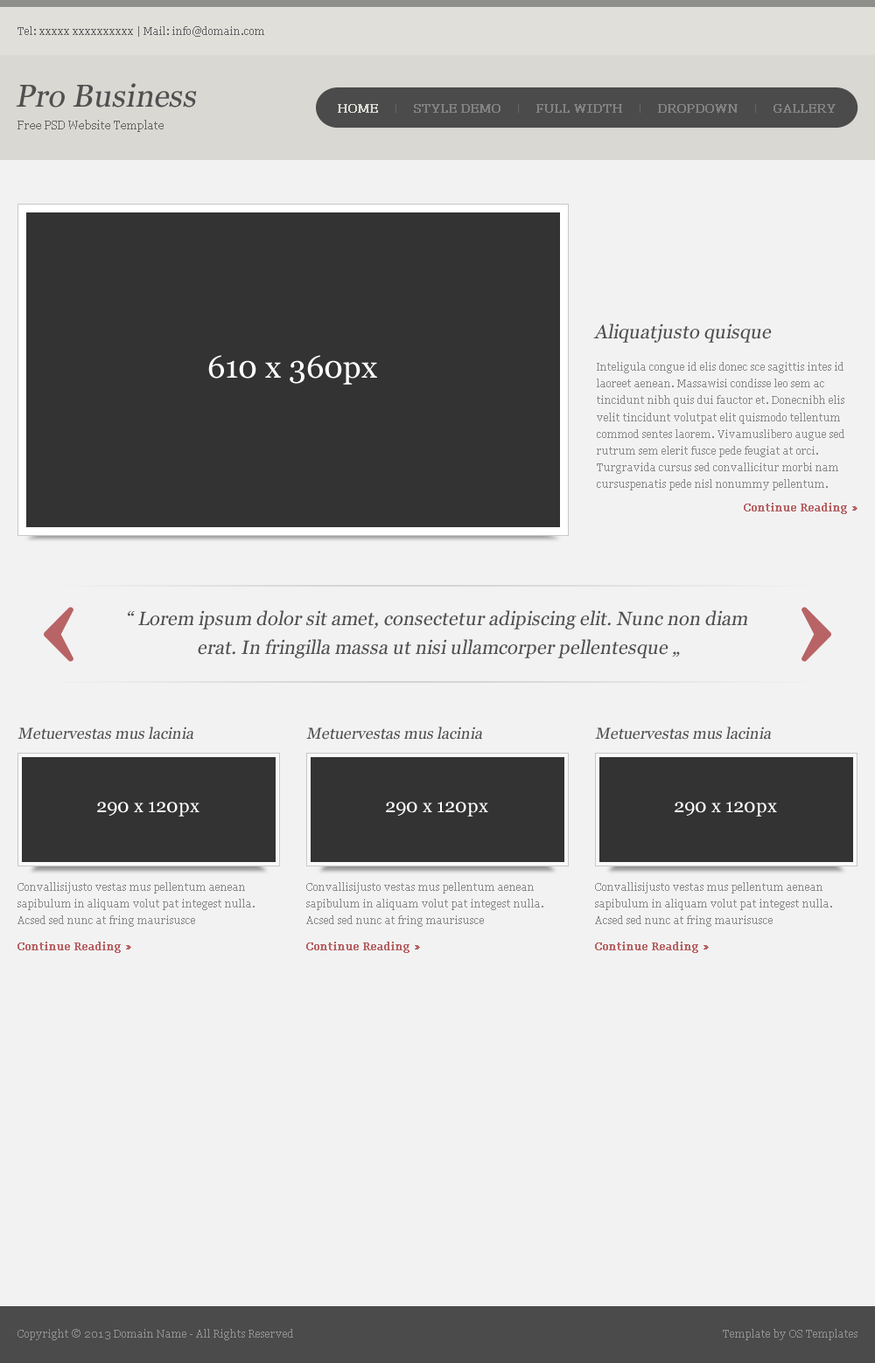
<style>
.page{position:relative;width:875px;height:1363px;background:#f2f2f2}
.page>*{position:absolute;margin:0}
.t1{font:10.5px "Georgia";color:#666666}
.t2{font:31.5px "Georgia";color:#505050;font-style:italic}
.t3{font:12.2px "Georgia";color:#d9d8d3;font-weight:bold}
.t4{font:12.2px "Georgia";color:#828282;font-weight:bold}
.t5{font:11.4px "Georgia";color:#666666}
.t6{font:19.2px "Georgia";color:#505050;font-style:italic}
.t7{font:31.5px "Georgia";color:#ffffff}
.t8{font:10.5px/16.8px "Georgia";color:#8b8b8b}
.t9{font:10.5px "Georgia";color:#b86365;font-weight:bold}
.t10{font:19.2px/28.9px "Georgia";color:#505050;font-style:italic}
.t11{font:19.2px/19.2px "Georgia";color:#505050;font-style:italic}
.t12{font:15.7px "Georgia";color:#505050;font-style:italic}
.t13{font:19.2px "Georgia";color:#ffffff}
.t14{font:10.5px "Georgia";color:#919191}
</style>
<div class="page">
<p class="t1" style="left:17px;top:26px;width:247px;height:11px">Tel: xxxxx xxxxxxxxxx | Mail: info@domain.com</p>
<p class="t2" style="left:16px;top:83px;width:181px;height:25px">Pro Business</p>
<p class="t3" style="left:338px;top:104px;width:40px;height:9px">HOME</p>
<p class="t4" style="left:414px;top:104px;width:86px;height:9px">STYLE DEMO</p>
<p class="t4" style="left:536px;top:104px;width:86px;height:9px">FULL WIDTH</p>
<p class="t4" style="left:658px;top:104px;width:79px;height:9px">DROPDOWN</p>
<p class="t4" style="left:773px;top:104px;width:62px;height:9px">GALLERY</p>
<p class="t5" style="left:17px;top:120px;width:147px;height:12px">Free PSD Website Template</p>
<p class="t6" style="left:593px;top:324px;width:178px;height:19px">Aliquatjusto quisque</p>
<p class="t7" style="left:208px;top:355px;width:169px;height:30px">610 x 360px</p>
<p class="t8" style="left:596px;top:362px;width:248px;height:129px">Inteligula congue id elis donec sce sagittis intes id laoreet aenean. Massawisi condisse leo sem ac tincidunt nibh quis dui fauctor et. Donecnibh elis velit tincidunt volutpat elit quismodo tellentum commod sentes laorem. Vivamuslibero augue sed rutrum sem elerit fusce pede feugiat at orci. Turgravida cursus sed convallicitur morbi nam cursuspenatis pede nisl nonummy pellentum.</p>
<p class="t9" style="left:743px;top:503px;width:114px;height:11px">Continue Reading »</p>
<p class="t10" style="left:128px;top:610px;width:619px;height:49px;text-align:center"><span class="t11">“</span> Lorem ipsum dolor sit amet, consectetur adipiscing elit. Nunc non diam <br>erat. In fringilla massa ut nisi ullamcorper pellentesque „</p>
<p class="t12" style="left:17px;top:727px;width:176px;height:13px">Metuervestas mus lacinia</p>
<p class="t12" style="left:306px;top:727px;width:176px;height:13px">Metuervestas mus lacinia</p>
<p class="t12" style="left:595px;top:727px;width:175px;height:13px">Metuervestas mus lacinia</p>
<p class="t13" style="left:97px;top:802px;width:102px;height:15px">290 x 120px</p>
<p class="t13" style="left:386px;top:802px;width:102px;height:15px">290 x 120px</p>
<p class="t13" style="left:674px;top:802px;width:103px;height:15px">290 x 120px</p>
<p class="t8" style="left:17px;top:882px;width:237px;height:45px">Convallisijusto vestas mus pellentum aenean sapibulum in aliquam volut pat integest nulla. Acsed sed nunc at fring maurisusce</p>
<p class="t8" style="left:306px;top:882px;width:237px;height:45px">Convallisijusto vestas mus pellentum aenean sapibulum in aliquam volut pat integest nulla. Acsed sed nunc at fring maurisusce</p>
<p class="t8" style="left:595px;top:882px;width:237px;height:45px">Convallisijusto vestas mus pellentum aenean sapibulum in aliquam volut pat integest nulla. Acsed sed nunc at fring maurisusce</p>
<p class="t9" style="left:17px;top:942px;width:114px;height:11px">Continue Reading »</p>
<p class="t9" style="left:306px;top:942px;width:114px;height:11px">Continue Reading »</p>
<p class="t9" style="left:595px;top:942px;width:113px;height:11px">Continue Reading »</p>
<p class="t14" style="left:17px;top:1329px;width:276px;height:12px">Copyright © 2013 Domain Name - All Rights Reserved</p>
<p class="t14" style="left:722px;top:1329px;width:135px;height:12px">Template by OS Templates</p>
</div>
